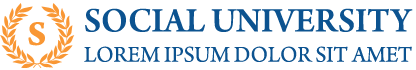
<style>
.page{position:relative;width:416px;height:70px;background:#ffffff}
.page>*{position:absolute;margin:0}
.t1{font:36px "ArnoPro-SmbdSubhead";color:#0c5390;text-transform:uppercase}
.t2{font:36px "ArnoPro-BoldCaption";color:#f99734;text-transform:uppercase}
.t3{font:23.5px "ArnoPro-Subhead";color:#0c5390;text-transform:uppercase}
</style>
<div class="page">
<p class="t1" style="left:85px;top:8px;width:328px;height:24px">Social University</p>
<p class="t2" style="left:28px;top:22px;width:17px;height:24px">S</p>
<p class="t3" style="left:84px;top:46px;width:328px;height:16px">Lorem ipsum dolor sit amet</p>
</div>
